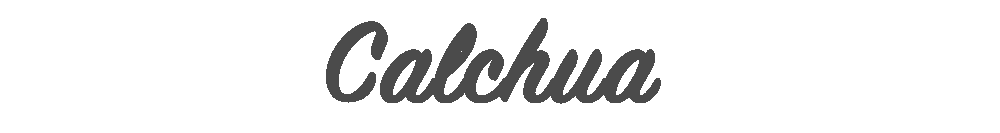
<style>
.page{position:relative;width:1000px;height:133px;background:#ffffff}
.page>*{position:absolute;margin:0}
.t1{font:120px "SignPainter-HouseScript";color:#4b4b4b;font-weight:bold}
</style>
<div class="page">
<p class="t1" style="left:326px;top:18px;width:335px;height:86px">Calchua</p>
</div>
